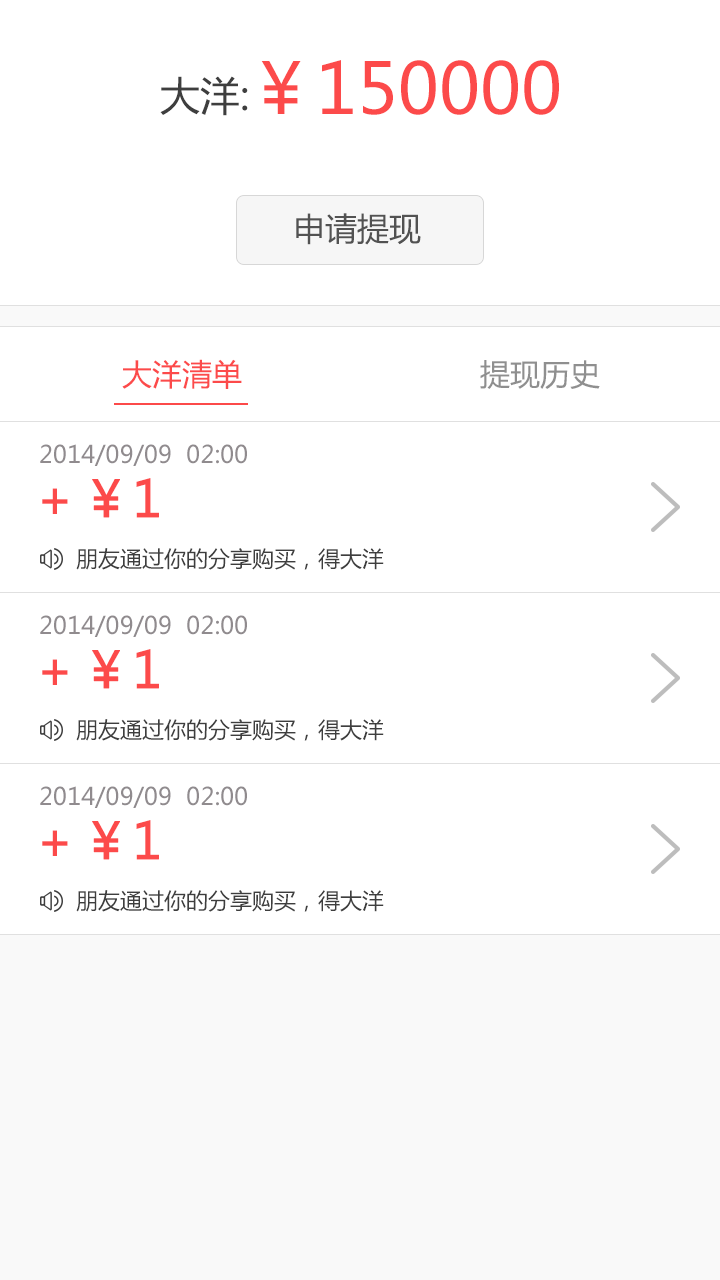
<style>
.page{position:relative;width:720px;height:1280px;background:#ffffff}
.page>*{position:absolute;margin:0}
.t1{font:70px "MicrosoftYaHei";color:#fc4a4a}
.t2{font:40px "MicrosoftYaHei";color:#3e3e3e;text-transform:uppercase}
.t3{font:32px "MicrosoftYaHei";color:#525252}
.t4{font:30px "MicrosoftYaHei";color:#fc4a4a}
.t5{font:30px "MicrosoftYaHei";color:#8f8f8f}
.t6{font:24px "MicrosoftYaHei";color:#908b8e}
.t7{font:50px "MicrosoftYaHei";color:#fc4a4a;font-weight:bold}
.t8{font:22px "MicrosoftYaHei";color:#3e3e3e}
</style>
<div class="page">
<p class="t1" style="left:261px;top:60px;width:298px;height:55px">￥150000</p>
<p class="t2" style="left:160px;top:76px;width:88px;height:40px">大洋:</p>
<p class="t3" style="left:296px;top:213px;width:125px;height:32px">申请提现</p>
<p class="t4" style="left:122px;top:359px;width:120px;height:30px">大洋清单</p>
<p class="t5" style="left:480px;top:360px;width:120px;height:29px">提现历史</p>
<p class="t6" style="left:40px;top:444px;width:207px;height:22px">2014/09/09  02:00</p>
<p class="t7" style="left:42px;top:478px;width:117px;height:40px">＋￥1</p>
<p class="t8" style="left:76px;top:548px;width:308px;height:22px">朋友通过你的分享购买，得大洋</p>
<p class="t6" style="left:40px;top:615px;width:207px;height:22px">2014/09/09  02:00</p>
<p class="t7" style="left:42px;top:649px;width:117px;height:40px">＋￥1</p>
<p class="t8" style="left:76px;top:719px;width:308px;height:22px">朋友通过你的分享购买，得大洋</p>
<p class="t6" style="left:40px;top:786px;width:207px;height:22px">2014/09/09  02:00</p>
<p class="t7" style="left:42px;top:820px;width:117px;height:40px">＋￥1</p>
<p class="t8" style="left:76px;top:890px;width:308px;height:22px">朋友通过你的分享购买，得大洋</p>
</div>
